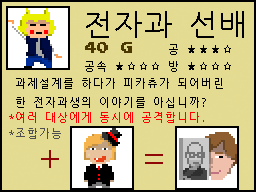
<style>
.page{position:relative;width:256px;height:192px;background:#e4db92}
.page>*{position:absolute;margin:0}
.t1{font:30px "NanumGothicCoding";color:#000000}
.t2{font:12px "PressStart2P";color:#4b3800}
.t3{font:11px "NanumGothicCoding";color:#000000}
.t4{font:11px "NanumGothicCoding";color:#ff0000}
.t5{font:11px "NanumGothicCoding";color:#4f4f4f}
.t6{font:36px "NanumGothicCoding";color:#900707}
</style>
<div class="page">
<p class="t1" style="left:86px;top:11px;width:158px;height:27px">전자과 선배</p>
<p class="t2" style="left:85px;top:42px;width:47px;height:11px">40 G</p>
<p class="t3" style="left:169px;top:44px;width:62px;height:11px">공 ★★★☆</p>
<p class="t3" style="left:85px;top:61px;width:146px;height:11px">공속 ★☆☆☆ 방 ★☆☆☆</p>
<p class="t3" style="left:16px;top:78px;width:207px;height:30px">과제설계를 하다가 피카츄가 되어버린<br>한 전자과생의 이야기를 아십니까?</p>
<p class="t4" style="left:9px;top:112px;width:195px;height:11px">*여러 대상에게 동시에 공격합니다.</p>
<p class="t5" style="left:9px;top:128px;width:52px;height:11px">*조합가능</p>
<p class="t6" style="left:41px;top:150px;width:18px;height:18px">+</p>
<p class="t6" style="left:145px;top:154px;width:18px;height:10px">=</p>
</div>
